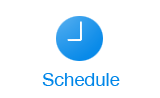
<style>
.page{position:relative;width:160px;height:98px;background:#ffffff}
.page>*{position:absolute;margin:0}
.t1{font:18.5px "HelveticaNeue";color:#0086e8}
</style>
<div class="page">
<p class="t1" style="left:42px;top:73px;width:78px;height:13px">Schedule</p>
</div>
